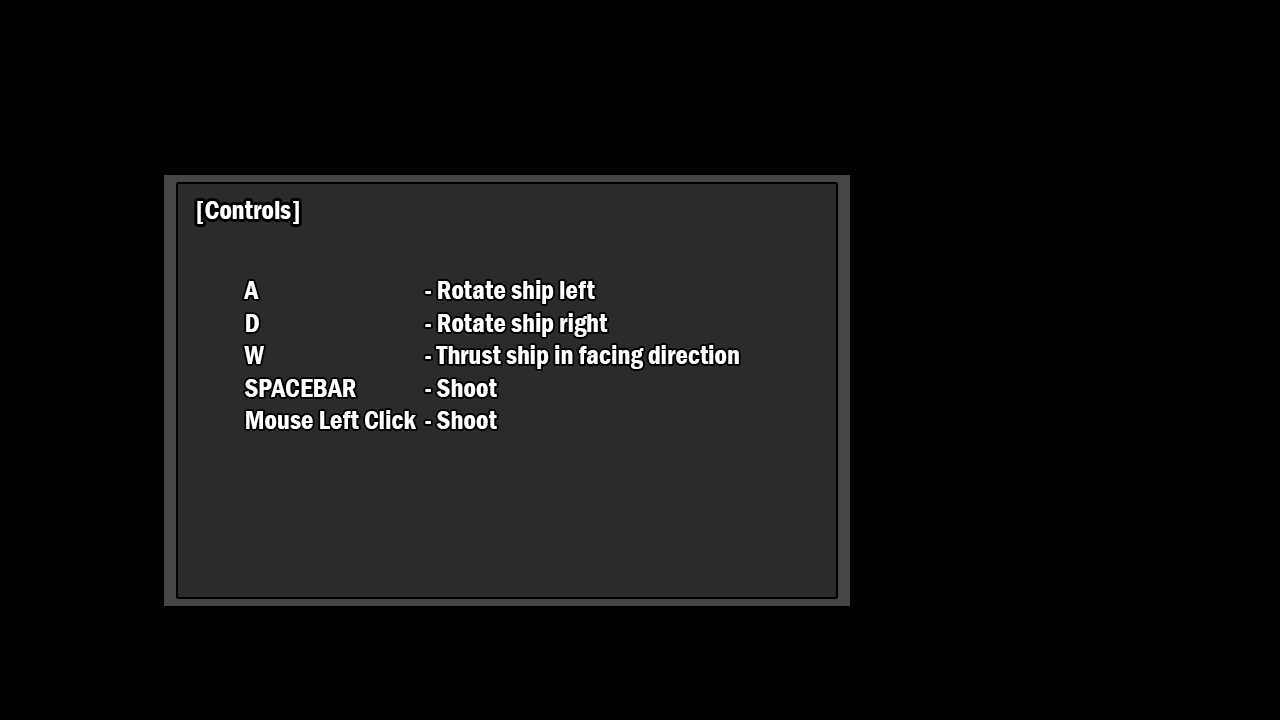
<style>
.page{position:relative;width:1280px;height:720px;background:#000000}
.page>*{position:absolute;margin:0}
.t1{font:27px "FranklinGothic-DemiCond";color:#ffffff}
</style>
<div class="page">
<p class="t1" style="left:197px;top:201px;width:102px;height:23px">[Controls]</p>
<p class="t1" style="left:243px;top:280px;width:496px;height:149px">A      - Rotate ship left<br>D      - Rotate ship right<br>W      - Thrust ship in facing direction<br>SPACEBAR   - Shoot<br>Mouse Left Click  - Shoot</p>
</div>
